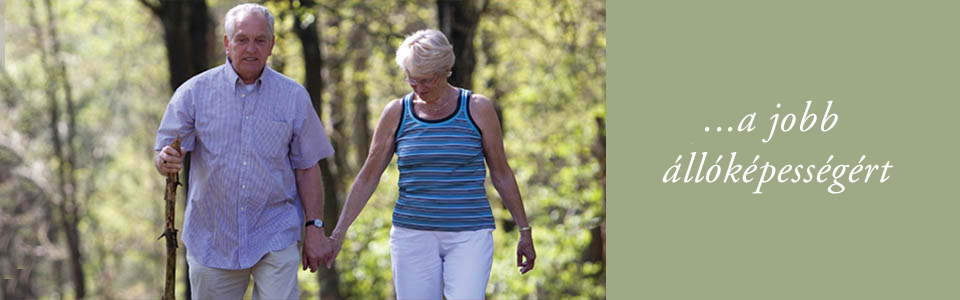
<style>
.page{position:relative;width:960px;height:300px;background:#9eaa86}
.page>*{position:absolute;margin:0}
.t1{font:42.4px "AGaramond-Italic";letter-spacing:0.015em;color:#ffffff}
</style>
<div class="page">
<p class="t1" style="left:662px;top:100px;width:231px;height:94px;text-align:center">...a jobb <br>állóképességért</p>
</div>
